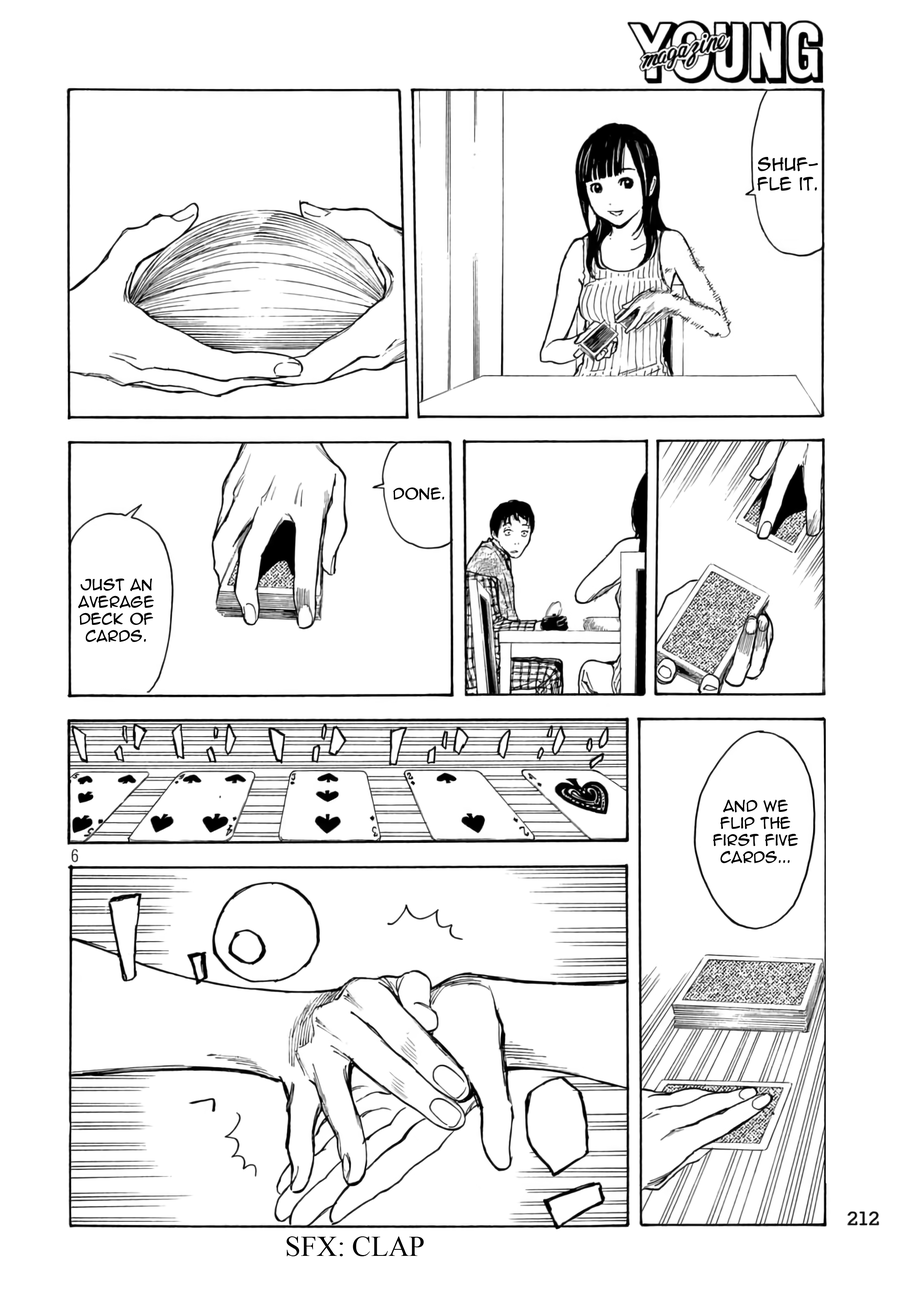
<style>
.page{position:relative;width:916px;height:1301px;background:#ffffff}
.page>*{position:absolute;margin:0}
.t1{font:16.3px "AnimeAce2.0BB";color:#000000}
.t2{font:14.2px "AnimeAce2.0BB";color:#000000}
.t3{font:28.5px "TimesNewRomanPSMT";color:#000000;text-transform:uppercase}
</style>
<div class="page">
<p class="t1" style="left:758px;top:157px;width:60px;height:34px;text-align:center">Shuf-<br>fle it.</p>
<p class="t2" style="left:394px;top:488px;width:50px;height:12px">Done.</p>
<p class="t2" style="left:78px;top:579px;width:76px;height:63px;text-align:center">Just an average deck of cards.</p>
<p class="t2" style="left:714px;top:800px;width:85px;height:64px;text-align:center">And we <br>flip the first five cards...</p>
<p class="t3" style="left:287px;top:1236px;width:137px;height:20px">SFX: clap</p>
</div>
